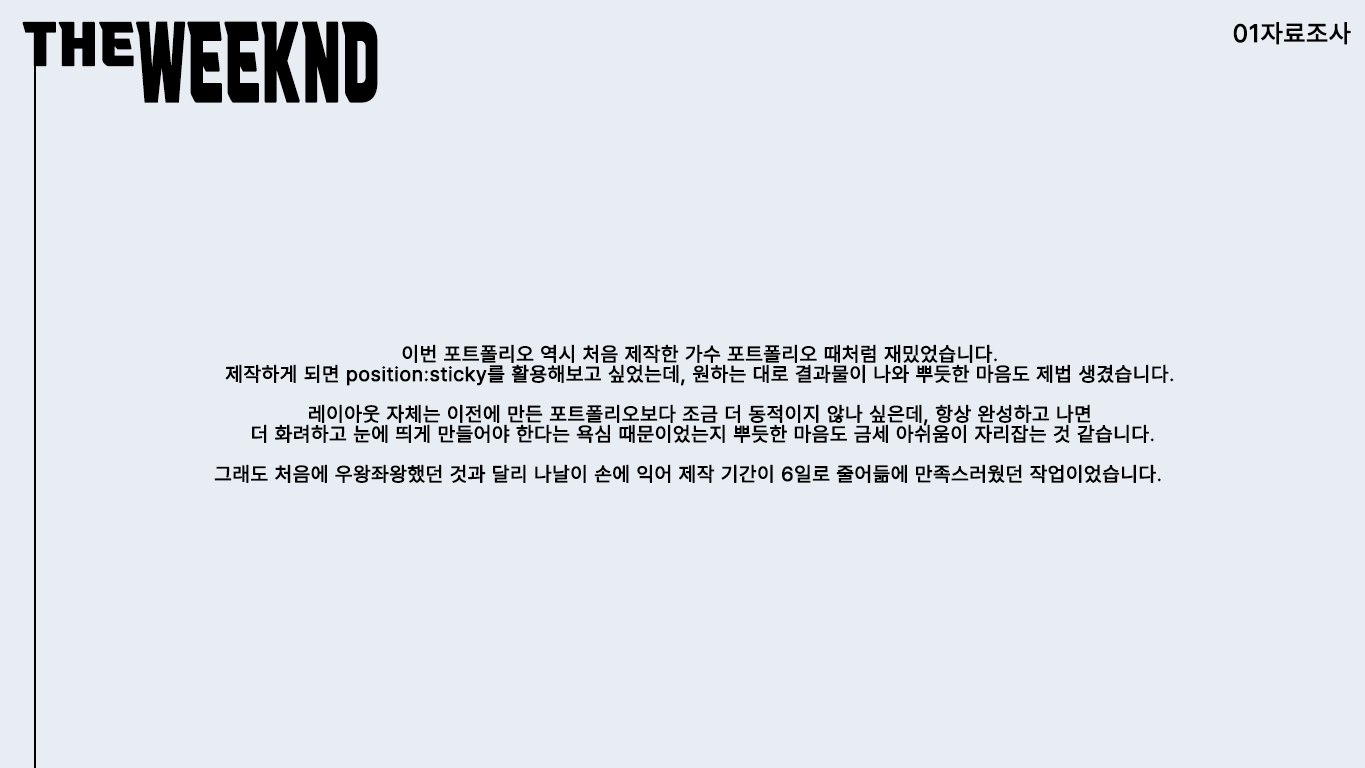
<style>
.page{position:relative;width:1365px;height:768px;background:#e8edf3}
.page>*{position:absolute;margin:0}
.t1{font:50px "VITRO-CORE-TTF";letter-spacing:0.03em;color:#000000;font-weight:bold}
.t2{font:91.5px "VITRO-CORE-TTF";letter-spacing:0.03em;color:#000000;font-weight:bold;scale:0.55 1}
.t3{font:25px "Pretendard-Regular";letter-spacing:0.03em;color:#000000;font-weight:bold}
.t4{font:20px/20px "Pretendard-Regular";letter-spacing:0.03em;color:#000000;font-weight:bold}
</style>
<div class="page">
<p class="t1" style="left:22px;top:21px;width:112px;height:46px">THE</p>
<p class="t2" style="left:136px;top:21px;width:242px;height:82px">WEEKND</p>
<p class="t3" style="left:1233px;top:22px;width:118px;height:23px">01자료조사</p>
<p class="t4" style="left:214px;top:344px;width:960px;height:139px;text-align:center">이번 포트폴리오 역시 처음 제작한 가수 포트폴리오 때처럼 재밌었습니다.<br>제작하게 되면 position:sticky를 활용해보고 싶었는데, 원하는 대로 결과물이 나와 뿌듯한 마음도 제법 생겼습니다.<br><br>레이아웃 자체는 이전에 만든 포트폴리오보다 조금 더 동적이지 않나 싶은데, 항상 완성하고 나면<br> 더 화려하고 눈에 띄게 만들어야 한다는 욕심 때문이었는지 뿌듯한 마음도 금세 아쉬움이 자리잡는 것 같습니다.<br><br>그래도 처음에 우왕좌왕했던 것과 달리 나날이 손에 익어 제작 기간이 6일로 줄어듦에 만족스러웠던 작업이었습니다.</p>
</div>
